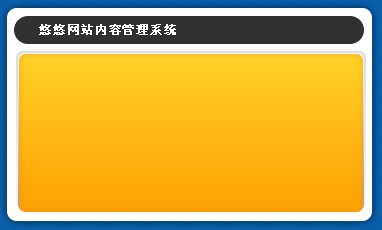
<style>
.page{position:relative;width:382px;height:230px}
.page>*{position:absolute;margin:0}
.t1{font:12px "SimSun";letter-spacing:0.075em;color:#ffffff;font-weight:bold}
</style>
<div class="page">
<p class="t1" style="left:39px;top:24px;width:137px;height:11px">悠悠网站内容管理系统</p>
</div>
